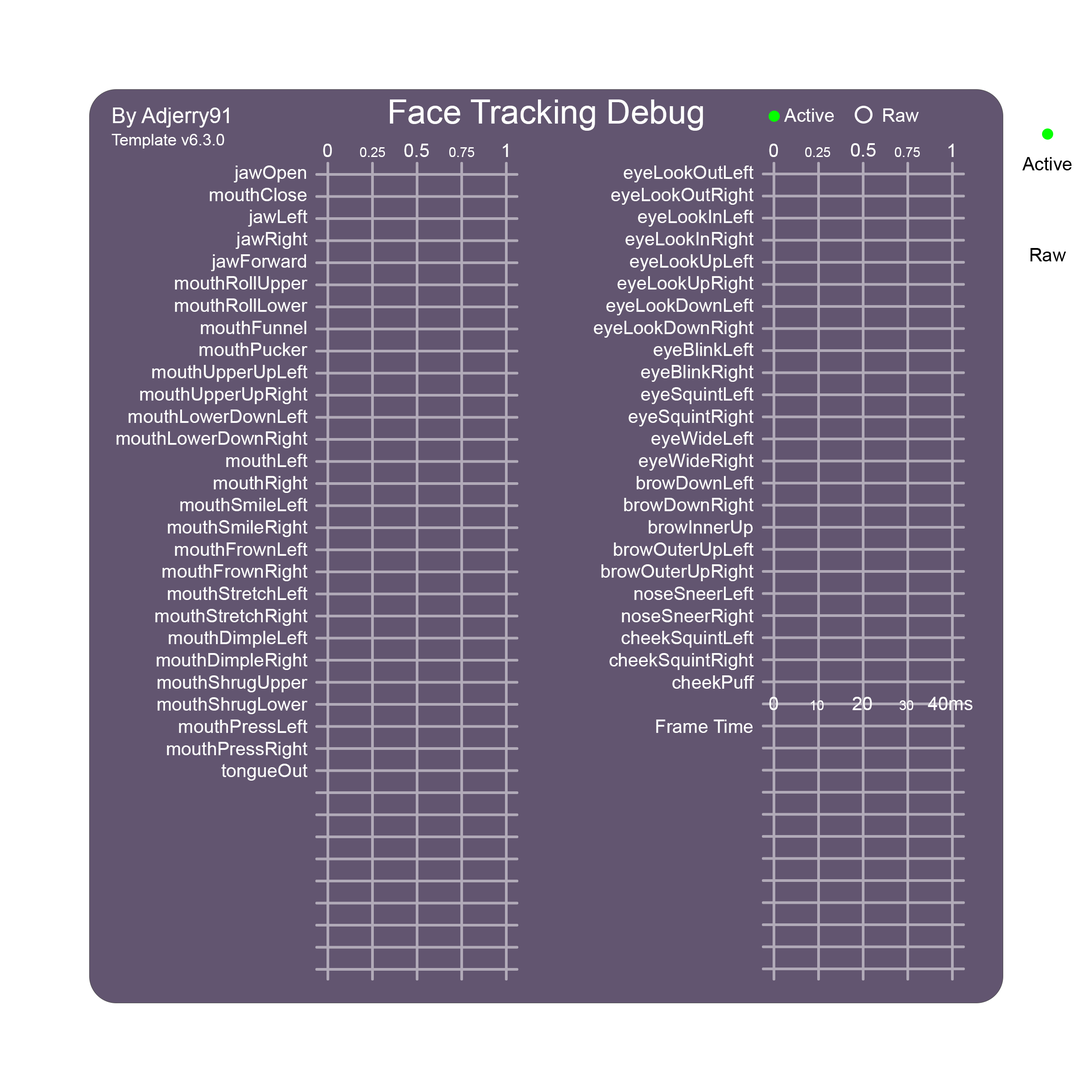
<style>
.page{position:relative;width:1092px;height:1092px;background:#625570}
.page>*{position:absolute;margin:0}
.t1{font:33.5px "ArialMT";color:#ffffff}
.t2{font:21.4px "ArialMT";color:#ffffff}
.t3{font:18.5px "ArialMT";color:#ffffff}
.t4{font:16.1px "ArialMT";color:#ffffff}
.t5{font:13.4px "ArialMT";color:#ffffff}
.t6{font:18.6px "ArialMT";color:#ffffff}
.t7{font:18.5px "ArialMT";color:#000000}
.t8{font:18.7px "ArialMT";color:#ffffff}
</style>
<div class="page">
<p class="t1" style="left:390px;top:99px;width:313px;height:32px">Face Tracking Debug</p>
<p class="t2" style="left:113px;top:108px;width:116px;height:20px">By Adjerry91</p>
<p class="t3" style="left:784px;top:108px;width:50px;height:14px">Active</p>
<p class="t3" style="left:883px;top:108px;width:36px;height:14px">Raw</p>
<p class="t4" style="left:112px;top:134px;width:112px;height:15px">Template v6.3.0</p>
<p class="t3" style="left:323px;top:144px;width:9px;height:13px">0</p>
<p class="t5" style="left:360px;top:147px;width:25px;height:10px">0.25</p>
<p class="t3" style="left:404px;top:144px;width:25px;height:13px">0.5</p>
<p class="t5" style="left:449px;top:147px;width:25px;height:10px">0.75</p>
<p class="t3" style="left:503px;top:144px;width:5px;height:13px">1</p>
<p class="t3" style="left:769px;top:144px;width:9px;height:13px">0</p>
<p class="t5" style="left:805px;top:147px;width:25px;height:10px">0.25</p>
<p class="t6" style="left:851px;top:143px;width:25px;height:14px">0.5</p>
<p class="t5" style="left:895px;top:147px;width:25px;height:10px">0.75</p>
<p class="t3" style="left:948px;top:144px;width:6px;height:13px">1</p>
<p class="t7" style="left:1022px;top:157px;width:49px;height:13px">Active</p>
<p class="t3" style="left:116px;top:165px;width:192px;height:616px;text-align:right">jawOpen<br>mouthClose<br>jawLeft<br>jawRight<br>jawForward<br>mouthRollUpper<br>mouthRollLower<br>mouthFunnel<br>mouthPucker<br>mouthUpperUpLeft<br>mouthUpperUpRight<br>mouthLowerDownLeft<br>mouthLowerDownRight<br>mouthLeft<br>mouthRight<br>mouthSmileLeft<br>mouthSmileRight<br>mouthFrownLeft<br>mouthFrownRight<br>mouthStretchLeft<br>mouthStretchRight<br>mouthDimpleLeft<br>mouthDimpleRight<br>mouthShrugUpper<br>mouthShrugLower<br>mouthPressLeft<br>mouthPressRight<br>tongueOut</p>
<p class="t3" style="left:594px;top:165px;width:160px;height:568px;text-align:right">eyeLookOutLeft<br>eyeLookOutRight<br>eyeLookInLeft<br>eyeLookInRight<br>eyeLookUpLeft<br>eyeLookUpRight<br>eyeLookDownLeft<br>eyeLookDownRight<br>eyeBlinkLeft<br>eyeBlinkRight<br>eyeSquintLeft<br>eyeSquintRight<br>eyeWideLeft<br>eyeWideRight<br>browDownLeft<br>browDownRight<br>browInnerUp<br>browOuterUpLeft<br>browOuterUpRight<br>noseSneerLeft<br>noseSneerRight<br>cheekSquintLeft<br>cheekSquintRight<br>cheekPuff<br><br>Frame Time</p>
<p class="t7" style="left:1030px;top:248px;width:36px;height:13px">Raw</p>
<p class="t3" style="left:769px;top:697px;width:9px;height:13px">0</p>
<p class="t5" style="left:811px;top:700px;width:13px;height:10px">10</p>
<p class="t8" style="left:852px;top:697px;width:20px;height:13px">20</p>
<p class="t5" style="left:899px;top:700px;width:15px;height:10px">30</p>
<p class="t3" style="left:928px;top:697px;width:44px;height:13px">40ms</p>
</div>
